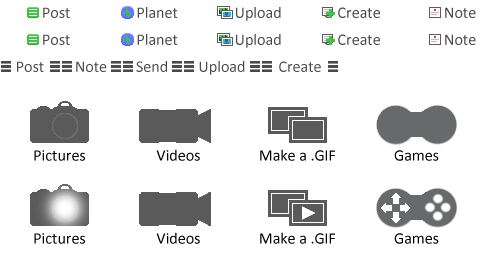
<style>
.page{position:relative;width:500px;height:266px;background:#ffffff}
.page>*{position:absolute;margin:0}
.t1{font:16px "Calibri";color:#474747}
.t2{font:16px "Calibri";color:#494949}
.t3{font:16px "Calibri";color:#000000}
.t4{font:16px "Calibri";color:#e6931d}
</style>
<div class="page">
<p class="t1" style="left:28px;top:7px;width:42px;height:11px">O Post</p>
<p class="t1" style="left:123px;top:7px;width:55px;height:11px">O Planet</p>
<p class="t1" style="left:221px;top:7px;width:60px;height:14px">O Upload</p>
<p class="t1" style="left:324px;top:7px;width:56px;height:11px">O Create</p>
<p class="t1" style="left:430px;top:7px;width:46px;height:11px">O Note</p>
<p class="t1" style="left:28px;top:34px;width:42px;height:11px">O Post</p>
<p class="t1" style="left:123px;top:34px;width:55px;height:11px">O Planet</p>
<p class="t1" style="left:221px;top:34px;width:60px;height:14px">O Upload</p>
<p class="t1" style="left:324px;top:34px;width:56px;height:11px">O Create</p>
<p class="t1" style="left:430px;top:34px;width:46px;height:11px">O Note</p>
<p class="t2" style="left:17px;top:61px;width:27px;height:11px">Post</p>
<p class="t2" style="left:76px;top:61px;width:31px;height:11px">Note</p>
<p class="t2" style="left:136px;top:61px;width:31px;height:11px">Send</p>
<p class="t2" style="left:199px;top:61px;width:46px;height:14px">Upload</p>
<p class="t2" style="left:279px;top:61px;width:42px;height:11px">Create</p>
<p class="t3" style="left:34px;top:150px;width:51px;height:11px"><span class="t4"><br><br><br></span>Pictures</p>
<p class="t3" style="left:156px;top:149px;width:44px;height:12px"><span class="t4"><br><br><br></span>Videos</p>
<p class="t3" style="left:260px;top:149px;width:75px;height:12px"><span class="t4"><br><br><br></span>Make a .GIF</p>
<p class="t3" style="left:394px;top:150px;width:45px;height:11px"><span class="t4"><br><br><br></span>Games</p>
<p class="t3" style="left:34px;top:233px;width:51px;height:11px"><span class="t4"><br><br><br></span>Pictures</p>
<p class="t3" style="left:156px;top:232px;width:44px;height:12px"><span class="t4"><br><br><br></span>Videos</p>
<p class="t3" style="left:260px;top:232px;width:75px;height:12px"><span class="t4"><br><br><br></span>Make a .GIF</p>
<p class="t3" style="left:394px;top:233px;width:45px;height:11px"><span class="t4"><br><br><br></span>Games</p>
</div>
